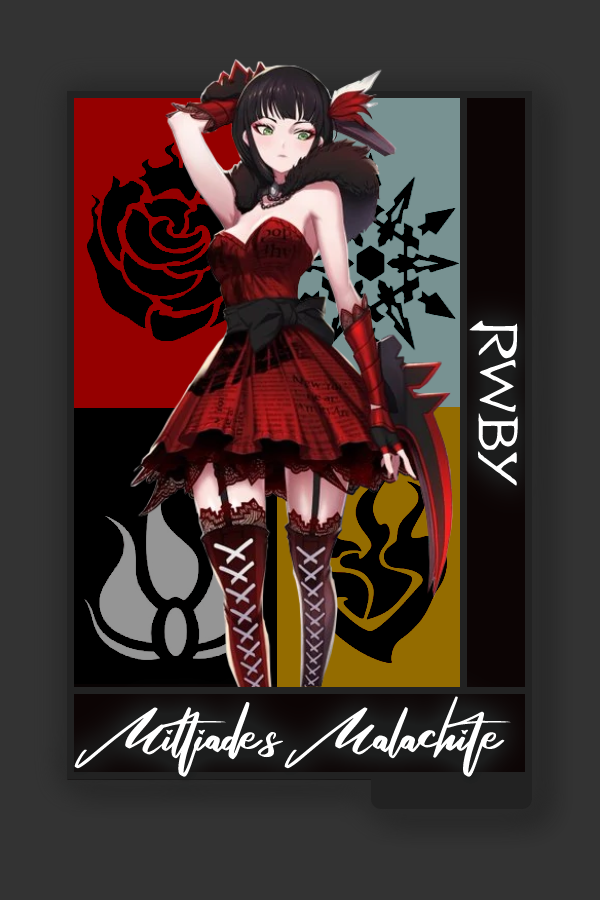
<style>
.page{position:relative;width:600px;height:900px;background:#333333}
.page>*{position:absolute;margin:0}
.t1{font:61.3px "RWBY_Style";color:#ffffff;scale:1.25 1}
.t2{font:76.6px "RosegaFREE";color:#ffffff;scale:0.91 1}
</style>
<div class="page">
<p class="t1" style="left:469px;top:320px;width:49px;height:166px;rotate:90deg">RWBY</p>
<p class="t2" style="left:74px;top:696px;width:437px;height:81px">Miltiades Malachite</p>
</div>
